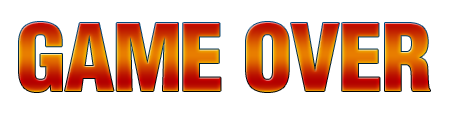
<style>
.page{position:relative;width:454px;height:116px;background:#ffffff}
.page>*{position:absolute;margin:0}
.t1{font:90px "HelveticaLTStd-BlkCond";letter-spacing:-0.025em}
</style>
<div class="page">
<p class="t1" style="left:19px;top:22px;width:411px;height:70px">GAME OVER</p>
</div>
